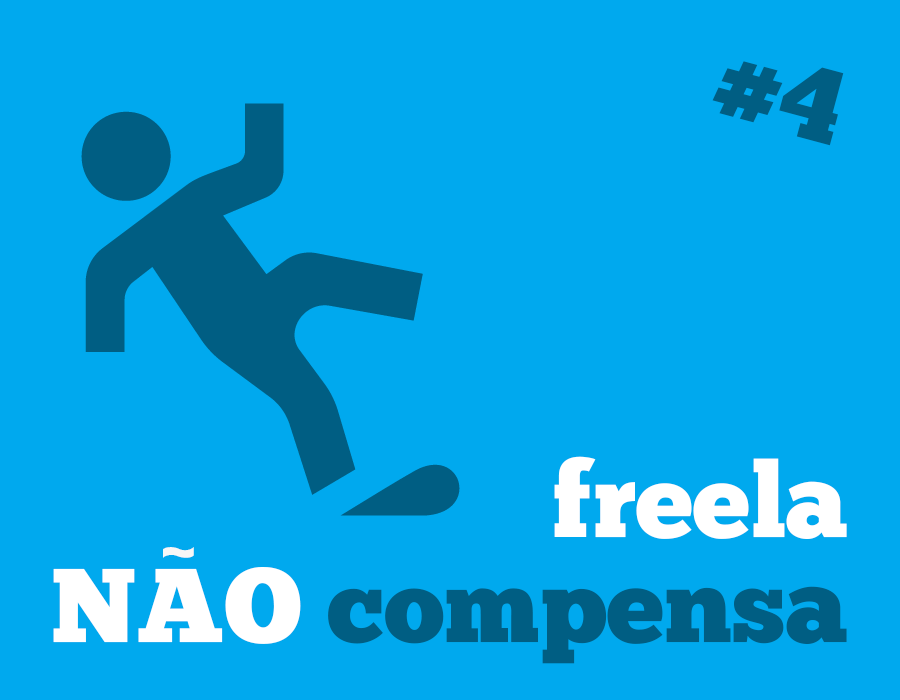
<style>
.page{position:relative;width:900px;height:700px;background:#00a9ee}
.page>*{position:absolute;margin:0}
.t1{font:104.5px "ChunkFive-Roman";color:#005e83}
.t2{font:104.5px/104.5px "ChunkFive-Roman";color:#ffffff}
.t3{font:104.5px/104.5px "ChunkFive-Roman";color:#005e83}
.t4{font:77.1px "ChunkFive-Roman";color:#f7f7f7}
</style>
<div class="page">
<p class="t1" style="left:712px;top:61px;width:132px;height:85px;rotate:15deg">#4</p>
<p class="t2" style="left:53px;top:456px;width:794px;height:208px;text-align:right">freela<br>NAO <span class="t3">compensa</span></p>
<p class="t4" style="left:163px;top:547px;width:31px;height:11px">~</p>
</div>
